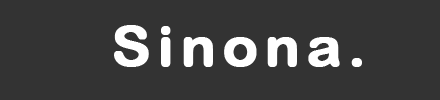
<style>
.page{position:relative;width:440px;height:100px;background:#333333}
.page>*{position:absolute;margin:0}
.t1{font:56.4px "ArialRoundedMTBold";letter-spacing:0.1em;color:#ffffff;font-weight:bold}
</style>
<div class="page">
<p class="t1" style="left:114px;top:25px;width:248px;height:42px">Sinona.</p>
</div>
